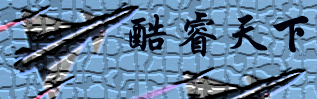
<style>
.page{position:relative;width:317px;height:99px}
.page>*{position:absolute;margin:0}
.t1{font:18px "STXingkai";color:#1216d8}
.t2{font:48px "STXingkai";color:#01020b}
</style>
<div class="page">
<p class="t1" style="left:129px;top:11px;width:180px;height:46px"><span class="t2">酷睿天下<br></span>您的网购生活专家</p>
</div>
